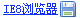
<style>
.page{position:relative;width:80px;height:18px;background:#ffffff}
.page>*{position:absolute;margin:0}
.t1{font:12px "NSimSun";color:#1432ee;text-decoration:underline}
.t2{font:12px "NSimSun";color:#689aad}
</style>
<div class="page">
<p class="t1" style="left:3px;top:3px;width:55px;height:12px"><span class="t2"> </span>IE8浏览器</p>
</div>
